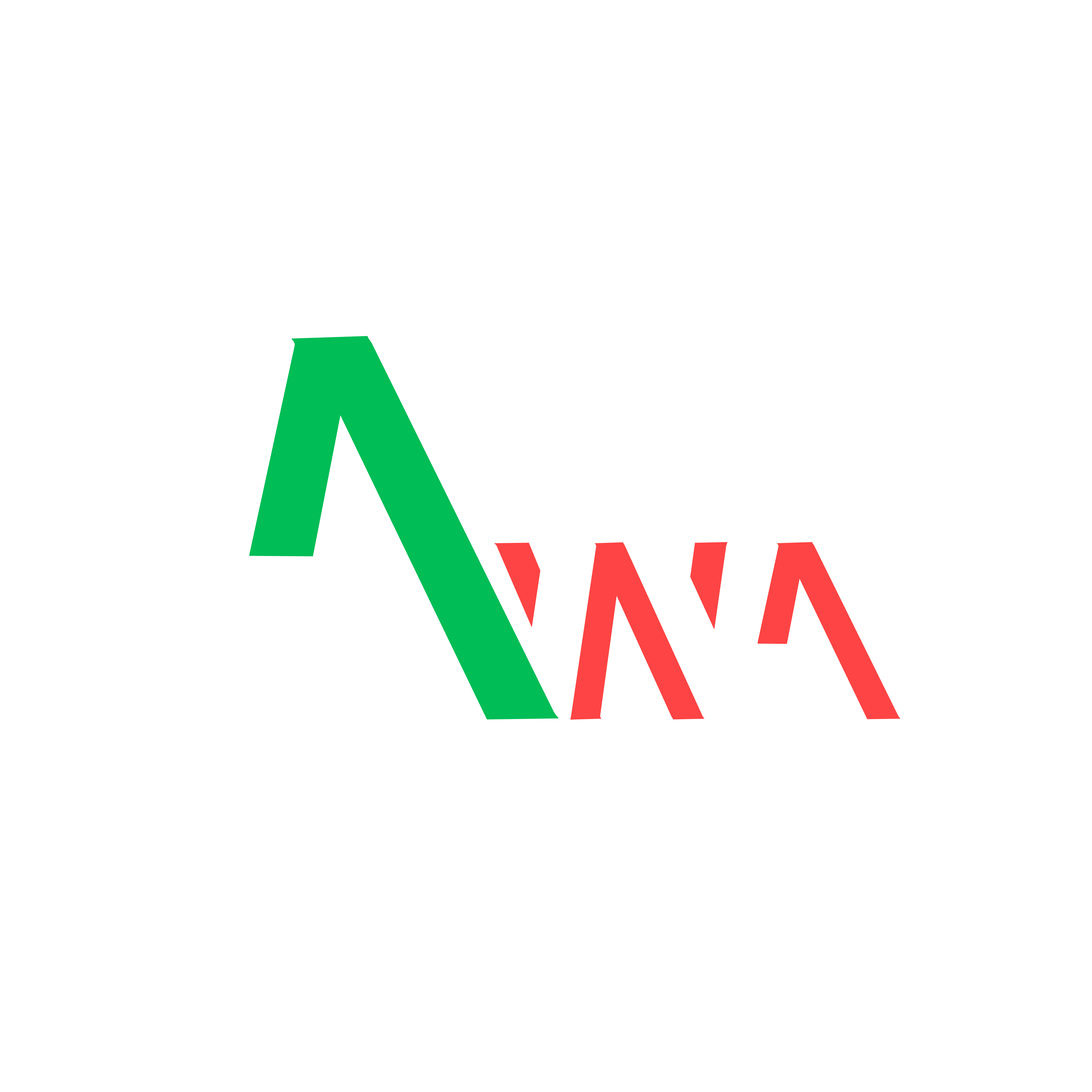
<style>
.page{position:relative;width:1092px;height:1092px;background:#ffffff}
.page>*{position:absolute;margin:0}
.t1{font:503.3px "SansForgetica-Regular";letter-spacing:-0.04em;color:#00bd56;font-weight:bold}
.t2{font:232.5px "SansForgetica-Regular";letter-spacing:-0.04em;color:#fe4444;font-weight:bold}
</style>
<div class="page">
<p class="t1" style="left:249px;top:336px;width:310px;height:384px">A</p>
<p class="t2" style="left:494px;top:542px;width:406px;height:178px">WA</p>
</div>
